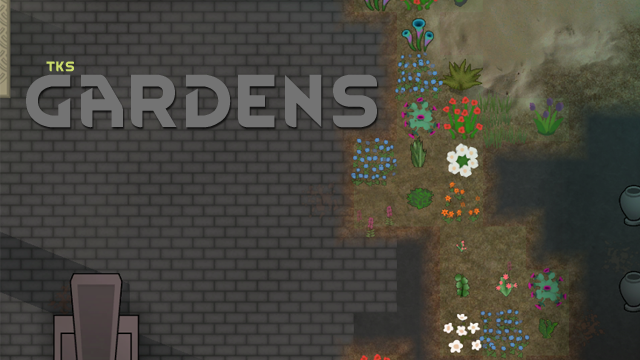
<style>
.page{position:relative;width:640px;height:360px}
.page>*{position:absolute;margin:0}
.t1{font:12px "RimWordFont";color:#cadb6a}
.t2{font:63.5px "RimWordFont";color:#737373}
</style>
<div class="page">
<p class="t1" style="left:46px;top:61px;width:28px;height:11px">tks</p>
<p class="t2" style="left:26px;top:74px;width:351px;height:54px">Gardens</p>
</div>
